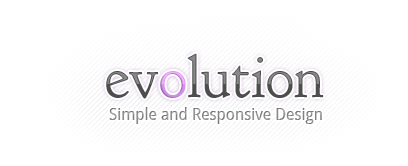
<style>
.page{position:relative;width:408px;height:166px;background:#ffffff}
.page>*{position:absolute;margin:0}
.t1{font:60px "GoudyBookletter1911"}
.t2{font:15.7px "DroidSans";color:#888888}
</style>
<div class="page">
<p class="t1" style="left:106px;top:53px;width:218px;height:46px">evolution</p>
<p class="t1" style="left:160px;top:71px;width:26px;height:27px">o</p>
<p class="t2" style="left:109px;top:107px;width:213px;height:17px">Simple and Responsive Design</p>
</div>
